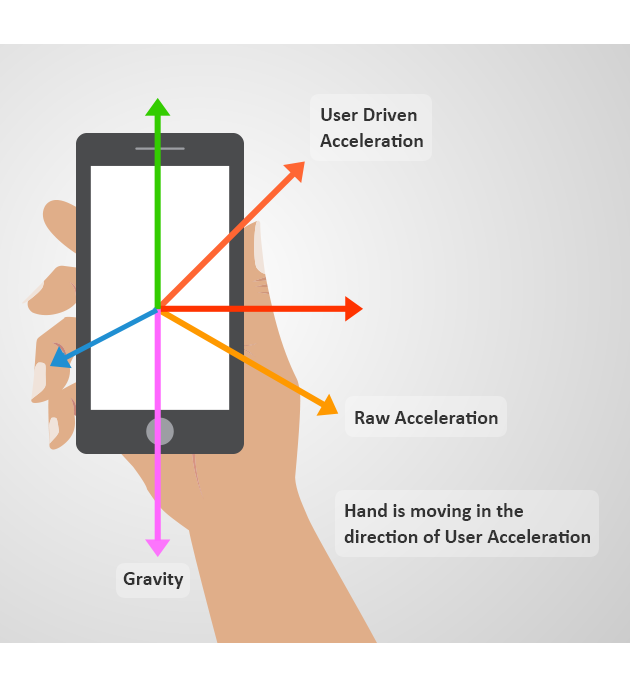
<style>
.page{position:relative;width:630px;height:689px}
.page>*{position:absolute;margin:0}
.t1{font:20px/26.4px "Calibri-Bold";color:#333333}
.t2{font:20px "Calibri-Bold";color:#333333}
</style>
<div class="page">
<p class="t1" style="left:320px;top:108px;width:103px;height:39px">User Driven <br>Acceleration</p>
<p class="t2" style="left:355px;top:410px;width:143px;height:14px">Raw Acceleration</p>
<p class="t1" style="left:344px;top:503px;width:246px;height:40px">Hand is moving in the <br>direction of User Acceleration</p>
<p class="t2" style="left:123px;top:572px;width:61px;height:17px">Gravity</p>
</div>
